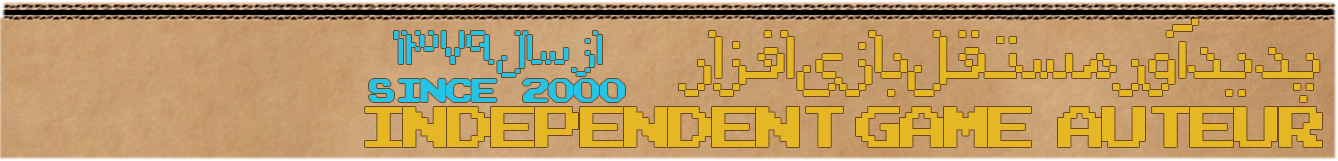
<style>
.page{position:relative;width:1338px;height:161px}
.page>*{position:absolute;margin:0}
.t1{font:73.7px "unixel";letter-spacing:-0.1em;color:#e6b725;scale:1.07 1}
.t2{font:52.4px "unixel";letter-spacing:-0.1em;color:#25c4e6;scale:1.07 1}
.t3{font:27.4px "ArcadeRounded";letter-spacing:-0.1em;color:#25c4e6;scale:1.07 1}
.t4{font:47.1px "ArcadeNormal";letter-spacing:-0.1em;color:#e6b725;scale:1.07 1}
</style>
<div class="page">
<p class="t1" style="left:679px;top:19px;width:641px;height:83px">پدید آور مستقل  بازی افزار</p>
<p class="t2" style="left:394px;top:31px;width:208px;height:46px">از سال ۱۳۷۹</p>
<p class="t3" style="left:369px;top:79px;width:256px;height:23px">Since 2000</p>
<p class="t4" style="left:365px;top:107px;width:957px;height:40px">Independent Game Auteur</p>
</div>
